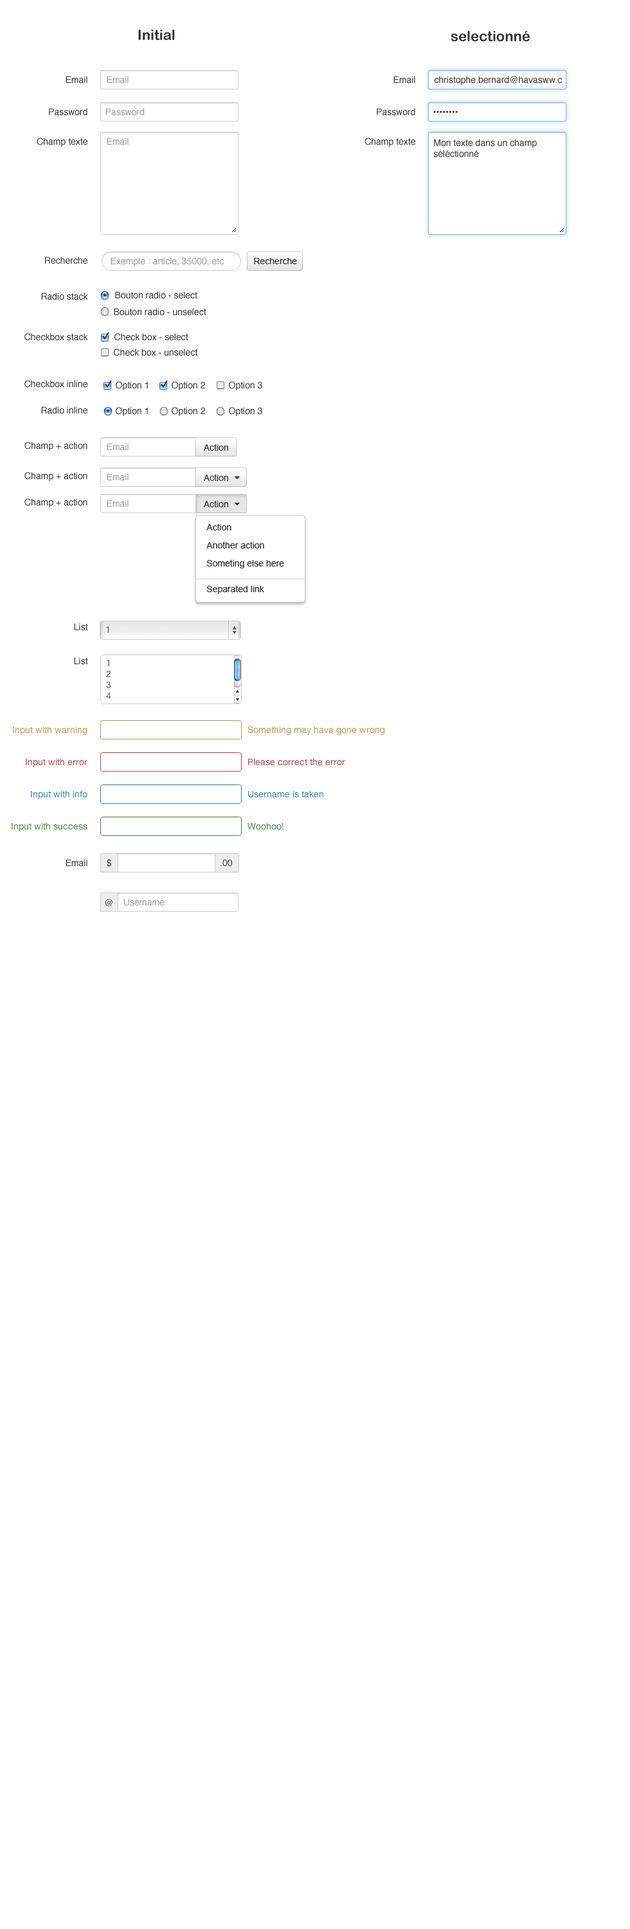
<style>
.page{position:relative;width:630px;height:1929px;background:#ffffff}
.page>*{position:absolute;margin:0}
.t1{font:14.1px "ArialRoundedMTBold";color:#333333}
.t2{font:9px "Helvetica";color:#333333}
.t3{font:9px "Helvetica";color:#999999}
.t4{font:9px "ArialMT";color:#343434}
.t5{font:9px "Helvetica";color:#343434}
.t6{font:9px/18px "ArialMT";color:#343434}
.t7{font:9px/25.7px "ArialMT";color:#343434}
</style>
<div class="page">
<p class="t1" style="left:138px;top:30px;width:37px;height:10px">Initial</p>
<p class="t1" style="left:451px;top:31px;width:79px;height:11px">selectionné</p>
<p class="t2" style="left:66px;top:76px;width:21px;height:8px">Email</p>
<p class="t3" style="left:107px;top:76px;width:22px;height:8px">Email</p>
<p class="t2" style="left:393px;top:76px;width:22px;height:8px">Email</p>
<p class="t2" style="left:435px;top:76px;width:127px;height:9px">christophe.bernard@havasww.c</p>
<p class="t2" style="left:49px;top:108px;width:38px;height:8px">Password</p>
<p class="t3" style="left:105px;top:108px;width:39px;height:8px">Password</p>
<p class="t2" style="left:377px;top:108px;width:38px;height:8px">Password</p>
<p class="t2" style="left:433px;top:111px;width:25px;height:2px">••••••••</p>
<p class="t2" style="left:37px;top:138px;width:50px;height:9px">Champ texte</p>
<p class="t3" style="left:107px;top:138px;width:22px;height:7px">Email</p>
<p class="t2" style="left:364px;top:138px;width:51px;height:9px">Champ texte</p>
<p class="t2" style="left:433px;top:139px;width:104px;height:19px">Mon texte dans un champ séléctionné</p>
<p class="t2" style="left:45px;top:256px;width:42px;height:8px">Recherche</p>
<p class="t3" style="left:111px;top:257px;width:113px;height:9px">Exemple : article, 35000, etc</p>
<p class="t4" style="left:254px;top:258px;width:43px;height:6px">Recherche</p>
<p class="t2" style="left:41px;top:292px;width:47px;height:8px">Radio stack</p>
<p class="t2" style="left:115px;top:291px;width:82px;height:8px">Bouton radio - select</p>
<p class="t2" style="left:114px;top:308px;width:92px;height:8px">Bouton radio - unselect</p>
<p class="t2" style="left:24px;top:333px;width:64px;height:8px">Checkbox stack</p>
<p class="t2" style="left:114px;top:333px;width:74px;height:8px">Check box - select</p>
<p class="t2" style="left:114px;top:348px;width:84px;height:8px">Check box - unselect</p>
<p class="t2" style="left:24px;top:380px;width:63px;height:8px">Checkbox inline</p>
<p class="t2" style="left:116px;top:381px;width:32px;height:9px">Option 1</p>
<p class="t2" style="left:172px;top:381px;width:33px;height:9px">Option 2</p>
<p class="t2" style="left:229px;top:381px;width:33px;height:9px">Option 3</p>
<p class="t2" style="left:41px;top:406px;width:46px;height:8px">Radio inline</p>
<p class="t2" style="left:116px;top:407px;width:32px;height:9px">Option 1</p>
<p class="t2" style="left:172px;top:407px;width:33px;height:9px">Option 2</p>
<p class="t2" style="left:229px;top:407px;width:33px;height:9px">Option 3</p>
<p class="t2" style="left:24px;top:442px;width:63px;height:9px">Champ + action</p>
<p class="t3" style="left:107px;top:443px;width:22px;height:8px">Email</p>
<p class="t5" style="left:203px;top:444px;width:25px;height:7px">Action</p>
<p class="t2" style="left:24px;top:472px;width:63px;height:9px">Champ + action</p>
<p class="t3" style="left:107px;top:473px;width:22px;height:8px">Email</p>
<p class="t5" style="left:203px;top:474px;width:25px;height:7px">Action</p>
<p class="t2" style="left:24px;top:498px;width:63px;height:9px">Champ + action</p>
<p class="t3" style="left:107px;top:500px;width:22px;height:7px">Email</p>
<p class="t5" style="left:203px;top:501px;width:25px;height:6px">Action</p>
<p class="t6" style="left:206px;top:523px;width:78px;height:71px">Action<br>Another action<br>Someting else here<br><span class="t7">Separated link</span></p>
<p class="t2" style="left:74px;top:623px;width:14px;height:8px">List</p>
<p class="t2" style="left:74px;top:657px;width:14px;height:8px">List</p>
<p class="t2" style="left:66px;top:859px;width:21px;height:8px">Email</p>
<p class="t2" style="left:107px;top:858px;width:4px;height:9px">$</p>
<p class="t2" style="left:221px;top:859px;width:11px;height:8px">.00</p>
<p class="t2" style="left:105px;top:899px;width:8px;height:7px">@</p>
<p class="t3" style="left:123px;top:898px;width:42px;height:8px">Username</p>
</div>
